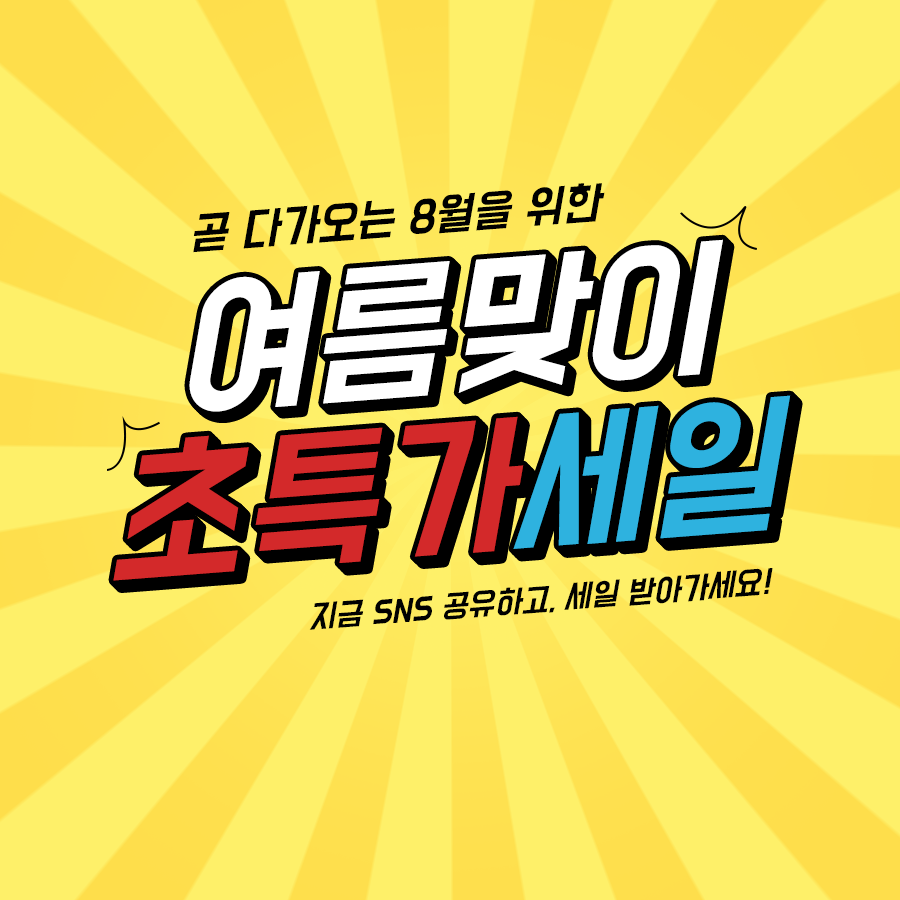
<style>
.page{position:relative;width:900px;height:900px;background:#fef069}
.page>*{position:absolute;margin:0}
.t1{font:40px "BMDoHyeon";color:#000000;font-style:italic}
.t2{font:140px "BMDoHyeon";color:#ffffff;font-style:italic}
.t3{font:140px "BMDoHyeon";color:#d3292a;font-style:italic}
.t4{font:140px "BMDoHyeon";color:#2eb2df;font-style:italic}
.t5{font:140px "BMDoHyeon";font-style:italic}
.t6{font:28px "BMDoHyeon";color:#010101;font-style:italic}
</style>
<div class="page">
<p class="t1" style="left:193px;top:183px;width:412px;height:70px;rotate:-4deg">곧 다가오는 8월을 위한</p>
<p class="t2" style="left:189px;top:239px;width:534px;height:173px;rotate:-4deg">여름맞이</p>
<p class="t2" style="left:191px;top:241px;width:534px;height:173px;rotate:-4deg">여름맞이</p>
<p class="t2" style="left:192px;top:243px;width:535px;height:172px;rotate:-4deg">여름맞이</p>
<p class="t2" style="left:194px;top:244px;width:534px;height:173px;rotate:-4deg">여름맞이</p>
<p class="t3" style="left:113px;top:395px;width:678px;height:186px;rotate:-4deg">초특가<span class="t4">세일</span></p>
<p class="t5" style="left:121px;top:403px;width:677px;height:185px;rotate:-4deg">초특가세일</p>
<p class="t6" style="left:309px;top:568px;width:464px;height:62px;rotate:-4deg">지금 SNS 공유하고, 세일 받아가세요!</p>
</div>
